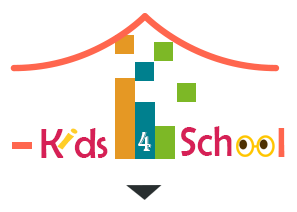
<style>
.page{position:relative;width:297px;height:212px;background:#ffffff}
.page>*{position:absolute;margin:0}
.t1{font:41.7px "BerlinSansFB-Reg";color:#d62056;scale:0.94 1}
.t2{font:41.7px "BerlinSansFB-Reg";color:#d62056}
.t3{font:38.6px "BerlinSansFB-Reg";color:#ffce27;scale:1.33 1}
.t4{font:28.9px "Algerian";color:#ffffff;scale:0.84 1}
.t5{font:42.9px "BerlinSansFB-Reg";color:#ff664e;scale:1.14 1}
</style>
<div class="page">
<p class="t1" style="left:181px;top:126px;width:51px;height:30px">Sch</p>
<p class="t2" style="left:41px;top:128px;width:67px;height:30px">K ds</p>
<p class="t3" style="left:57px;top:128px;width:21px;height:22px;rotate:32deg">i</p>
<p class="t4" style="left:138px;top:132px;width:14px;height:19px">4</p>
<p class="t5" style="left:278px;top:128px;width:7px;height:29px">l</p>
</div>
